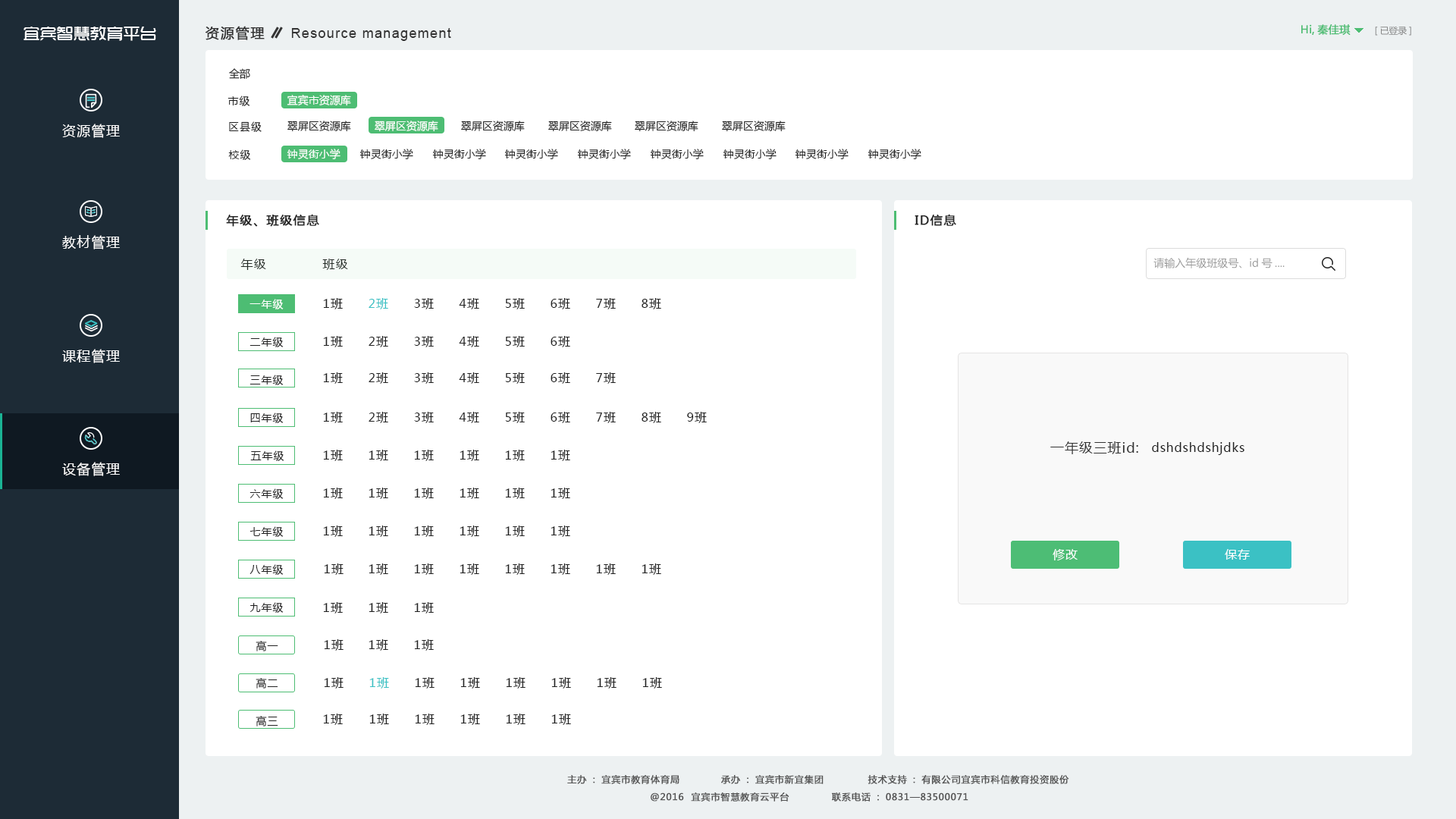
<style>
.page{position:relative;width:1456px;height:819px;background:#ffffff}
.page>*{position:absolute;margin:0}
.t1{font:16.7px "TRENDS";color:#ffffff}
.t2{font:13.6px "MicrosoftYaHei";letter-spacing:0.075em;color:#333333;font-weight:bold}
.t3{font:13.6px "ArialMT";letter-spacing:0.075em;color:#333333}
.t4{font:10.6px "MicrosoftYaHei";color:#4dbd73;font-weight:bold}
.t5{font:9.1px "MicrosoftYaHei";letter-spacing:-0.01em;color:#868686}
.t6{font:10.6px "MicrosoftYaHei";color:#222222}
.t7{font:10.6px "MicrosoftYaHei";letter-spacing:0.075em;color:#222222}
.t8{font:10.6px "MicrosoftYaHei";color:#ffffff}
.t9{font:13.6px "MicrosoftYaHei";letter-spacing:0.075em;color:#ffffff}
.t10{font:12.1px "MicrosoftYaHei";letter-spacing:0.075em;color:#222222;font-weight:bold}
.t11{font:10.6px "MicrosoftYaHei";color:#999999}
.t12{font:12.1px "MicrosoftYaHei";letter-spacing:0.075em;color:#222222}
.t13{font:10.6px "MicrosoftYaHei";letter-spacing:0.075em;color:#ffffff}
.t14{font:12.1px "MicrosoftYaHei";letter-spacing:0.075em;color:#3bc1c4}
.t15{font:13.6px "MicrosoftYaHei";letter-spacing:0.05em;color:#333333}
.t16{font:12.1px "MicrosoftYaHei";letter-spacing:0.05em;color:#222222}
.t17{font:12.1px "MicrosoftYaHei";letter-spacing:0.05em;color:#ffffff}
.t18{font:9.1px "MicrosoftYaHei";letter-spacing:0.05em;color:#545454;font-weight:bold}
</style>
<div class="page">
<p class="t1" style="left:24px;top:26px;width:132px;height:15px">宜宾智慧教育平台</p>
<p class="t2" style="left:206px;top:26px;width:59px;height:14px">资源管理</p>
<p class="t3" style="left:291px;top:28px;width:160px;height:13px">Resource management</p>
<p class="t4" style="left:1301px;top:24px;width:50px;height:11px">Hi,秦佳琪</p>
<p class="t5" style="left:1375px;top:26px;width:36px;height:10px">[已登录]</p>
<p class="t6" style="left:229px;top:68px;width:21px;height:11px">全部</p>
<p class="t7" style="left:227px;top:96px;width:23px;height:10px">市级</p>
<p class="t8" style="left:287px;top:95px;width:64px;height:11px">宜宾市资源库</p>
<p class="t9" style="left:62px;top:124px;width:58px;height:14px">资源管理</p>
<p class="t7" style="left:229px;top:121px;width:33px;height:11px">区县级</p>
<p class="t6" style="left:287px;top:121px;width:64px;height:11px">翠屏区资源库</p>
<p class="t8" style="left:375px;top:121px;width:63px;height:11px">翠屏区资源库</p>
<p class="t6" style="left:461px;top:121px;width:64px;height:11px">翠屏区资源库</p>
<p class="t6" style="left:548px;top:121px;width:64px;height:11px">翠屏区资源库</p>
<p class="t6" style="left:635px;top:121px;width:63px;height:11px">翠屏区资源库</p>
<p class="t6" style="left:722px;top:121px;width:64px;height:11px">翠屏区资源库</p>
<p class="t7" style="left:228px;top:149px;width:23px;height:11px">校级</p>
<p class="t8" style="left:287px;top:149px;width:53px;height:10px">钟灵街小学</p>
<p class="t6" style="left:359px;top:149px;width:54px;height:10px">钟灵街小学</p>
<p class="t6" style="left:432px;top:149px;width:54px;height:10px">钟灵街小学</p>
<p class="t6" style="left:504px;top:149px;width:54px;height:10px">钟灵街小学</p>
<p class="t6" style="left:577px;top:149px;width:54px;height:10px">钟灵街小学</p>
<p class="t6" style="left:650px;top:149px;width:54px;height:10px">钟灵街小学</p>
<p class="t6" style="left:723px;top:149px;width:54px;height:10px">钟灵街小学</p>
<p class="t6" style="left:795px;top:149px;width:54px;height:10px">钟灵街小学</p>
<p class="t6" style="left:868px;top:149px;width:53px;height:10px">钟灵街小学</p>
<p class="t10" style="left:226px;top:214px;width:93px;height:13px">年级、班级信息</p>
<p class="t10" style="left:915px;top:214px;width:41px;height:12px">ID信息</p>
<p class="t9" style="left:62px;top:235px;width:58px;height:14px">教材管理</p>
<p class="t11" style="left:1153px;top:257px;width:132px;height:11px">请输入年级班级号、id号....</p>
<p class="t12" style="left:240px;top:259px;width:26px;height:11px">年级</p>
<p class="t12" style="left:322px;top:259px;width:26px;height:11px">班级</p>
<p class="t13" style="left:249px;top:299px;width:35px;height:10px">一年级</p>
<p class="t12" style="left:323px;top:298px;width:20px;height:11px">1班</p>
<p class="t14" style="left:369px;top:298px;width:19px;height:11px">2班</p>
<p class="t12" style="left:414px;top:298px;width:20px;height:11px">3班</p>
<p class="t12" style="left:459px;top:298px;width:20px;height:11px">4班</p>
<p class="t12" style="left:505px;top:298px;width:20px;height:11px">5班</p>
<p class="t12" style="left:551px;top:298px;width:19px;height:11px">6班</p>
<p class="t12" style="left:596px;top:298px;width:20px;height:11px">7班</p>
<p class="t12" style="left:642px;top:298px;width:19px;height:11px">8班</p>
<p class="t7" style="left:249px;top:337px;width:35px;height:10px">二年级</p>
<p class="t12" style="left:323px;top:336px;width:20px;height:11px">1班</p>
<p class="t12" style="left:369px;top:336px;width:19px;height:11px">2班</p>
<p class="t12" style="left:414px;top:336px;width:20px;height:11px">3班</p>
<p class="t12" style="left:459px;top:336px;width:20px;height:11px">4班</p>
<p class="t12" style="left:505px;top:336px;width:20px;height:11px">5班</p>
<p class="t12" style="left:551px;top:336px;width:19px;height:11px">6班</p>
<p class="t9" style="left:62px;top:349px;width:58px;height:14px">课程管理</p>
<p class="t7" style="left:249px;top:375px;width:35px;height:10px">三年级</p>
<p class="t12" style="left:323px;top:372px;width:20px;height:12px">1班</p>
<p class="t12" style="left:369px;top:372px;width:19px;height:12px">2班</p>
<p class="t12" style="left:414px;top:372px;width:20px;height:12px">3班</p>
<p class="t12" style="left:459px;top:372px;width:20px;height:12px">4班</p>
<p class="t12" style="left:505px;top:372px;width:20px;height:12px">5班</p>
<p class="t12" style="left:551px;top:372px;width:19px;height:12px">6班</p>
<p class="t12" style="left:596px;top:372px;width:20px;height:12px">7班</p>
<p class="t7" style="left:250px;top:413px;width:34px;height:10px">四年级</p>
<p class="t12" style="left:323px;top:412px;width:20px;height:11px">1班</p>
<p class="t12" style="left:369px;top:412px;width:19px;height:11px">2班</p>
<p class="t12" style="left:414px;top:412px;width:20px;height:11px">3班</p>
<p class="t12" style="left:459px;top:412px;width:20px;height:11px">4班</p>
<p class="t12" style="left:505px;top:412px;width:20px;height:11px">5班</p>
<p class="t12" style="left:551px;top:412px;width:19px;height:11px">6班</p>
<p class="t12" style="left:596px;top:412px;width:20px;height:11px">7班</p>
<p class="t12" style="left:642px;top:412px;width:19px;height:11px">8班</p>
<p class="t12" style="left:687px;top:412px;width:20px;height:11px">9班</p>
<p class="t12" style="left:323px;top:450px;width:20px;height:11px">1班</p>
<p class="t12" style="left:369px;top:450px;width:19px;height:11px">1班</p>
<p class="t12" style="left:414px;top:450px;width:20px;height:11px">1班</p>
<p class="t12" style="left:460px;top:450px;width:19px;height:11px">1班</p>
<p class="t12" style="left:505px;top:450px;width:20px;height:11px">1班</p>
<p class="t12" style="left:551px;top:450px;width:19px;height:11px">1班</p>
<p class="t15" style="left:1050px;top:441px;width:88px;height:13px">一年级三班id:</p>
<p class="t16" style="left:1152px;top:442px;width:92px;height:13px">dshdshdshjdks</p>
<p class="t9" style="left:62px;top:462px;width:58px;height:14px">设备管理</p>
<p class="t7" style="left:250px;top:450px;width:34px;height:11px">五年级</p>
<p class="t7" style="left:249px;top:488px;width:35px;height:11px">六年级</p>
<p class="t12" style="left:323px;top:488px;width:20px;height:11px">1班</p>
<p class="t12" style="left:369px;top:488px;width:19px;height:11px">1班</p>
<p class="t12" style="left:414px;top:488px;width:20px;height:11px">1班</p>
<p class="t12" style="left:460px;top:488px;width:19px;height:11px">1班</p>
<p class="t12" style="left:505px;top:488px;width:20px;height:11px">1班</p>
<p class="t12" style="left:551px;top:488px;width:19px;height:11px">1班</p>
<p class="t7" style="left:249px;top:526px;width:35px;height:11px">七年级</p>
<p class="t12" style="left:323px;top:526px;width:20px;height:11px">1班</p>
<p class="t12" style="left:369px;top:526px;width:19px;height:11px">1班</p>
<p class="t12" style="left:414px;top:526px;width:20px;height:11px">1班</p>
<p class="t12" style="left:460px;top:526px;width:19px;height:11px">1班</p>
<p class="t12" style="left:505px;top:526px;width:20px;height:11px">1班</p>
<p class="t12" style="left:551px;top:526px;width:19px;height:11px">1班</p>
<p class="t17" style="left:1053px;top:549px;width:25px;height:11px">修改</p>
<p class="t17" style="left:1225px;top:549px;width:25px;height:11px">保存</p>
<p class="t7" style="left:249px;top:564px;width:35px;height:11px">八年级</p>
<p class="t12" style="left:324px;top:563px;width:20px;height:12px">1班</p>
<p class="t12" style="left:369px;top:563px;width:19px;height:12px">1班</p>
<p class="t12" style="left:414px;top:563px;width:20px;height:12px">1班</p>
<p class="t12" style="left:460px;top:563px;width:19px;height:12px">1班</p>
<p class="t12" style="left:505px;top:563px;width:20px;height:12px">1班</p>
<p class="t12" style="left:551px;top:563px;width:19px;height:12px">1班</p>
<p class="t12" style="left:596px;top:563px;width:20px;height:12px">1班</p>
<p class="t12" style="left:642px;top:563px;width:19px;height:12px">1班</p>
<p class="t7" style="left:249px;top:602px;width:35px;height:11px">九年级</p>
<p class="t12" style="left:323px;top:602px;width:20px;height:11px">1班</p>
<p class="t12" style="left:369px;top:602px;width:19px;height:11px">1班</p>
<p class="t12" style="left:414px;top:602px;width:20px;height:11px">1班</p>
<p class="t7" style="left:256px;top:641px;width:22px;height:10px">高一</p>
<p class="t12" style="left:324px;top:639px;width:20px;height:12px">1班</p>
<p class="t12" style="left:369px;top:639px;width:19px;height:12px">1班</p>
<p class="t12" style="left:414px;top:639px;width:20px;height:12px">1班</p>
<p class="t7" style="left:256px;top:678px;width:22px;height:11px">高二</p>
<p class="t12" style="left:324px;top:677px;width:20px;height:12px">1班</p>
<p class="t14" style="left:369px;top:677px;width:20px;height:12px">1班</p>
<p class="t12" style="left:415px;top:677px;width:20px;height:12px">1班</p>
<p class="t12" style="left:460px;top:677px;width:20px;height:12px">1班</p>
<p class="t12" style="left:506px;top:677px;width:20px;height:12px">1班</p>
<p class="t12" style="left:551px;top:677px;width:20px;height:12px">1班</p>
<p class="t12" style="left:597px;top:677px;width:20px;height:12px">1班</p>
<p class="t12" style="left:642px;top:677px;width:20px;height:12px">1班</p>
<p class="t12" style="left:323px;top:714px;width:20px;height:11px">1班</p>
<p class="t12" style="left:369px;top:714px;width:20px;height:11px">1班</p>
<p class="t12" style="left:415px;top:714px;width:20px;height:11px">1班</p>
<p class="t12" style="left:460px;top:714px;width:20px;height:11px">1班</p>
<p class="t12" style="left:506px;top:714px;width:20px;height:11px">1班</p>
<p class="t12" style="left:551px;top:714px;width:20px;height:11px">1班</p>
<p class="t7" style="left:256px;top:716px;width:22px;height:10px">高三</p>
<p class="t18" style="left:567px;top:775px;width:112px;height:9px">主办：宜宾市教育体育局</p>
<p class="t18" style="left:721px;top:775px;width:103px;height:9px">承办：宜宾市新宜集团</p>
<p class="t18" style="left:868px;top:775px;width:201px;height:9px">技术支持：有限公司宜宾市科信教育投资股份</p>
<p class="t18" style="left:651px;top:792px;width:138px;height:10px">@2016  宜宾市智慧教育云平台</p>
<p class="t18" style="left:832px;top:792px;width:136px;height:10px">联系电话：0831—83500071</p>
</div>
